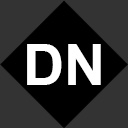
<style>
.page{position:relative;width:128px;height:128px;background:#333333}
.page>*{position:absolute;margin:0}
.t1{font:57.2px "Arial-BoldMT";color:#ffffff}
</style>
<div class="page">
<p class="t1" style="left:27px;top:44px;width:74px;height:41px">DN</p>
</div>
